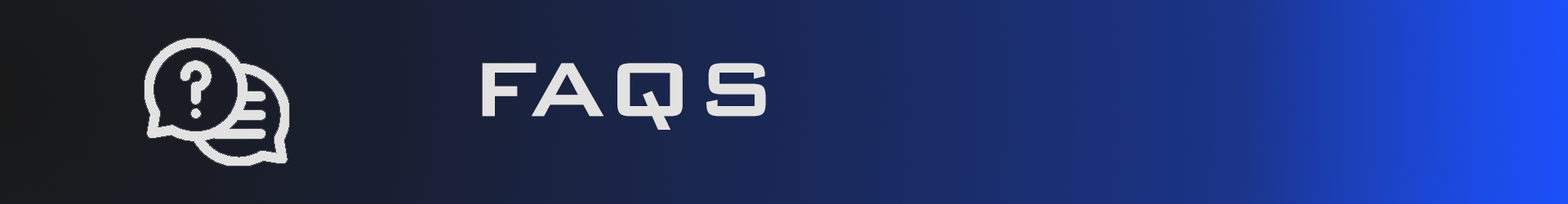
<style>
.page{position:relative;width:1568px;height:204px}
.page>*{position:absolute;margin:0}
.t1{font:102.1px "BankGothicBT-Medium";color:#e2e2e2}
</style>
<div class="page">
<p class="t1" style="left:482px;top:63px;width:284px;height:67px">FAQS</p>
</div>
